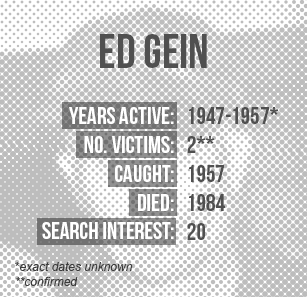
<style>
.page{position:relative;width:307px;height:297px;background:#bdbdbd}
.page>*{position:absolute;margin:0}
.t1{font:48px "BebasNeue";color:#505050}
.t2{font:24px "BebasNeue";color:#ffffff}
.t3{font:24px/125px "BebasNeue";color:#ffffff}
.t4{font:24px "BebasNeue";color:#505050}
.t5{font:24px/125px "BebasNeue";color:#505050}
.t6{font:24px/125px "Arial-BoldMT";color:#505050}
.t7{font:24px "Arial-BoldMT";color:#505050}
.t8{font:12px "Arial-ItalicMT";color:#3c3c3c}
.t9{font:12px "Arial-BoldMT";color:#3c3c3c}
</style>
<div class="page">
<p class="t1" style="left:100px;top:34px;width:107px;height:34px">ED GEIN</p>
<p class="t2" style="left:42px;top:107px;width:132px;height:132px;text-align:right"><span class="t3">YEARS ACTIVE:<br></span>No. Victims:<br>cAUGHT:<br>DIED:<br>SEARCH INTEREST:</p>
<p class="t4" style="left:187px;top:107px;width:92px;height:133px"><span class="t5">1947-1957</span><span class="t6">*<br></span>2<span class="t7">**<br></span>1957<br>1984<br>20</p>
<p class="t8" style="left:15px;top:262px;width:118px;height:24px"><span class="t9">*</span>exact dates unknown <br>**confirmed</p>
</div>
